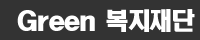
<style>
.page{position:relative;width:200px;height:40px;background:#333333}
.page>*{position:absolute;margin:0}
.t1{font:24px "HeadlineR-HM";letter-spacing:-0.08em;color:#ffffff}
</style>
<div class="page">
<p class="t1" style="left:17px;top:9px;width:178px;height:23px">Green 복지재단</p>
</div>
